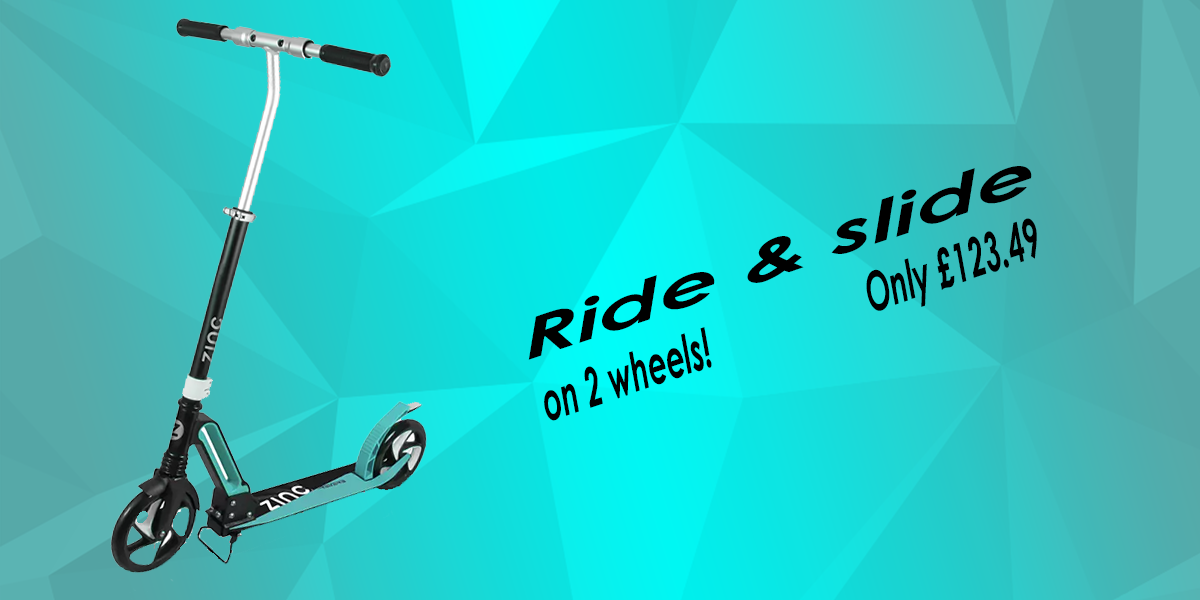
<style>
.page{position:relative;width:1200px;height:600px}
.page>*{position:absolute;margin:0}
.t1{font:53.8px "CenturyGothic-BoldItalic";color:#000000;font-style:italic;scale:0.55 1}
.t2{font:53.8px "CenturyGothic-BoldItalic";color:#000000;font-style:italic;scale:1.8 1}
</style>
<div class="page">
<p class="t1" style="left:528px;top:166px;width:509px;height:255px;rotate:-19deg"><span class="t2">Ride &amp; slide<br></span>on 2 wheels!                    Only £123.49</p>
</div>
